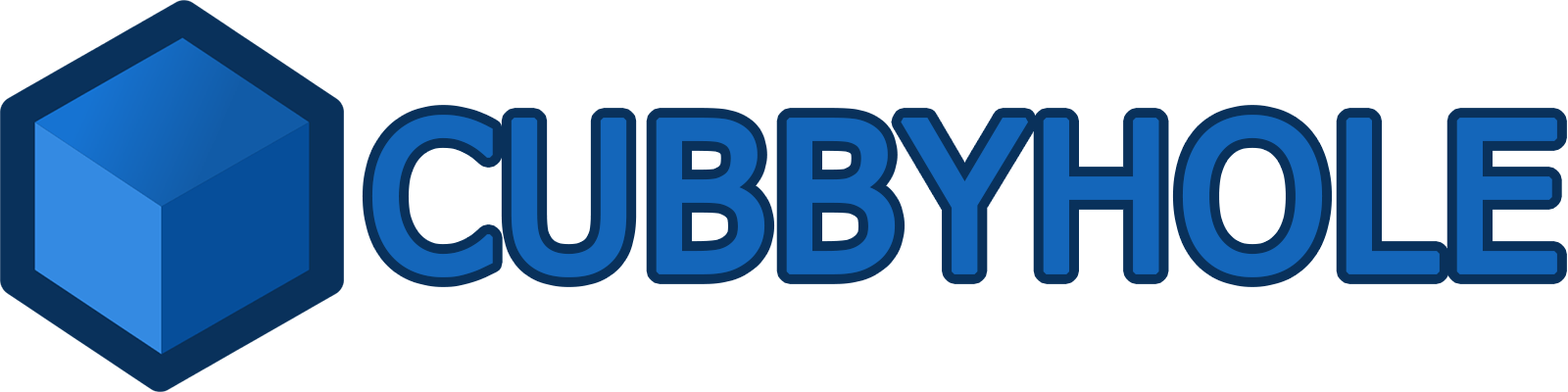
<style>
.page{position:relative;width:1568px;height:392px;background:#ffffff}
.page>*{position:absolute;margin:0}
.t1{font:207.4px "Tahoma";letter-spacing:0.01em;color:#1466ba;font-weight:bold}
</style>
<div class="page">
<p class="t1" style="left:371px;top:115px;width:1186px;height:162px">CUBBYHOLE</p>
</div>
